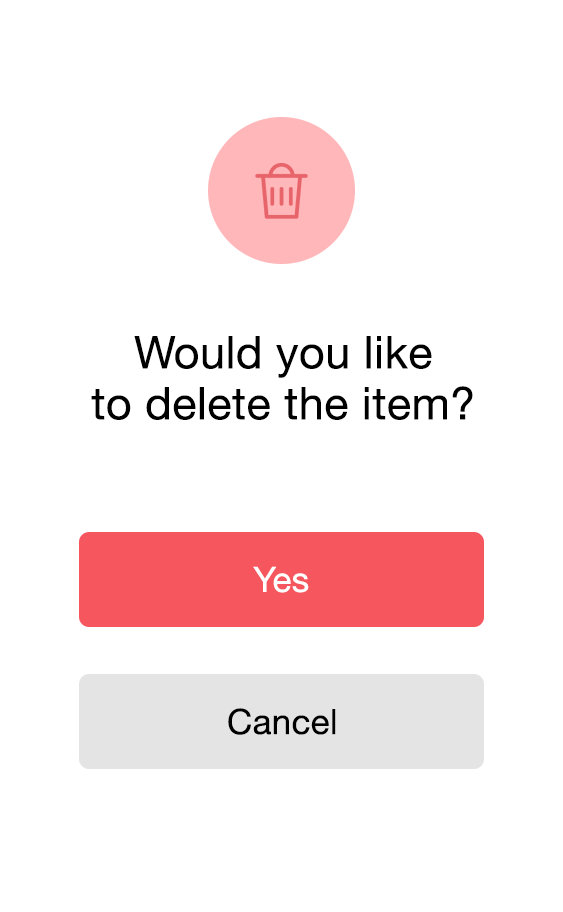
<style>
.page{position:relative;width:563px;height:912px;background:#ffffff}
.page>*{position:absolute;margin:0}
.t1{font:45px/51px "HelveticaNeue";letter-spacing:0.01em;color:#000000}
.t2{font:35px "HelveticaNeue";letter-spacing:0.01em;color:#ffffff}
.t3{font:35px "HelveticaNeue";letter-spacing:0.01em;color:#000000}
</style>
<div class="page">
<p class="t1" style="left:91px;top:336px;width:382px;height:84px;text-align:center">Would you like<br>to delete the item?</p>
<p class="t2" style="left:253px;top:566px;width:56px;height:27px">Yes</p>
<p class="t3" style="left:228px;top:708px;width:108px;height:27px">Cancel</p>
</div>
